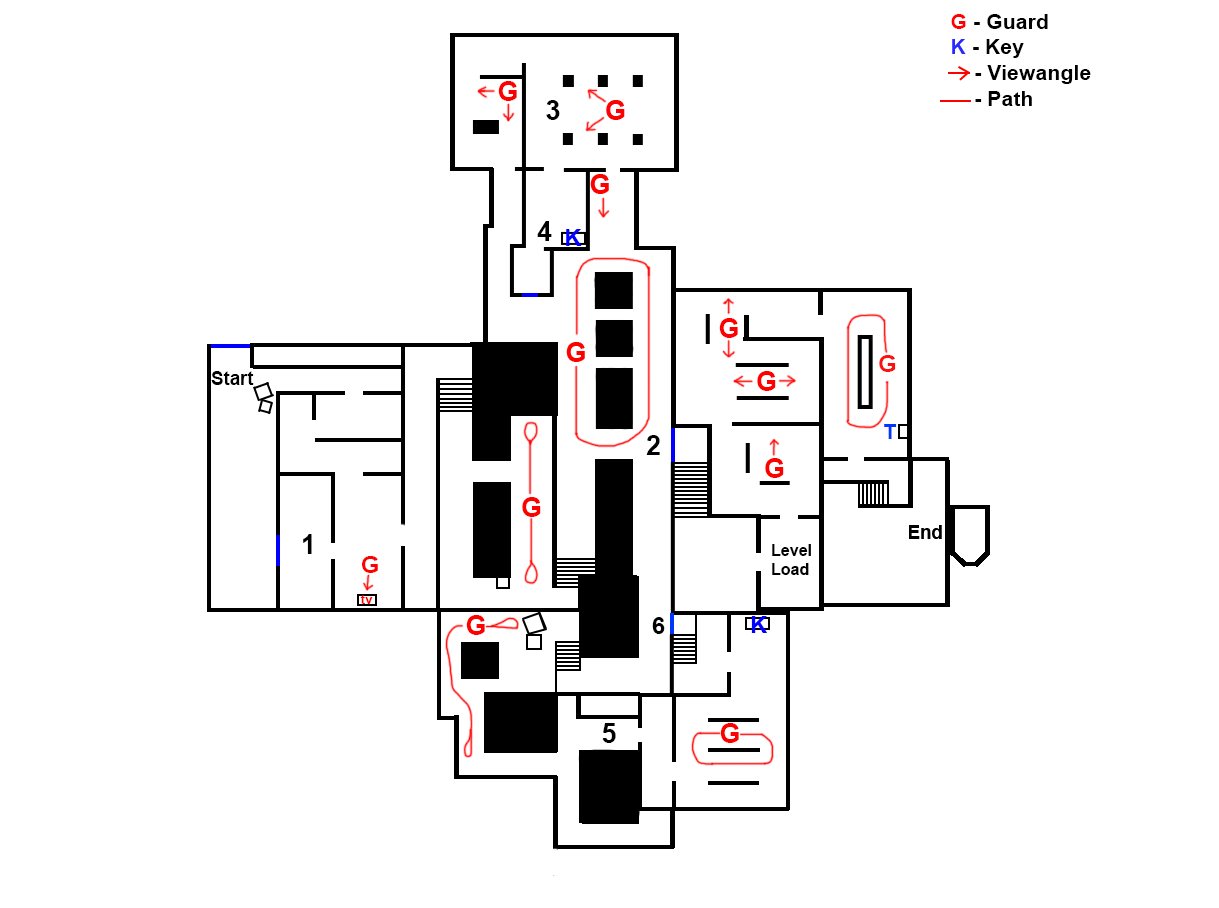
<style>
.page{position:relative;width:1219px;height:908px;background:#ffffff}
.page>*{position:absolute;margin:0}
.t1{font:21.3px "Arial-BoldMT";color:#000000}
.t2{font:21.3px "Arial-BoldMT";color:#ff0000}
.t3{font:21.3px "Arial-BoldMT";color:#2a2aff}
.t4{font:26.7px "Arial-BoldMT";color:#ff0000}
.t5{font:26.7px "Arial-BoldMT";color:#000000}
.t6{font:24px "Arial-BoldMT";color:#0000ff}
.t7{font:24px "Arial-BoldMT";color:#ff1010}
.t8{font:18.7px "Arial-BoldMT";color:#000000}
.t9{font:21.3px "Arial-BoldMT";color:#0036ff}
.t10{font:16px "Arial-BoldMT";color:#000000}
.t11{font:24px "Arial-BoldMT";color:#ff0000}
.t12{font:13.3px "Arial-BoldMT";color:#ff0000}
.t13{font:24px "Arial-BoldMT";color:#000000}
</style>
<div class="page">
<p class="t1" style="left:951px;top:14px;width:140px;height:92px"><span class="t2">G </span>- Guard<br><span class="t3">K </span>- Key<br>    - Viewangle<br>    - Path</p>
<p class="t4" style="left:498px;top:81px;width:19px;height:20px">G</p>
<p class="t5" style="left:546px;top:100px;width:14px;height:20px">3</p>
<p class="t5" style="left:537px;top:221px;width:15px;height:20px">4</p>
<p class="t6" style="left:566px;top:229px;width:16px;height:17px">K</p>
<p class="t4" style="left:719px;top:318px;width:19px;height:20px">G</p>
<p class="t7" style="left:879px;top:355px;width:17px;height:17px">G</p>
<p class="t8" style="left:211px;top:371px;width:43px;height:14px">Start</p>
<p class="t4" style="left:757px;top:371px;width:19px;height:20px">G</p>
<p class="t9" style="left:884px;top:424px;width:13px;height:15px">T</p>
<p class="t5" style="left:646px;top:435px;width:14px;height:20px">2</p>
<p class="t4" style="left:765px;top:458px;width:19px;height:20px">G</p>
<p class="t4" style="left:522px;top:497px;width:19px;height:20px">G</p>
<p class="t5" style="left:303px;top:534px;width:9px;height:20px">1</p>
<p class="t10" style="left:772px;top:544px;width:39px;height:31px">Level<br>Load</p>
<p class="t11" style="left:362px;top:556px;width:16px;height:17px">G</p>
<p class="t12" style="left:360px;top:595px;width:13px;height:9px">tv</p>
<p class="t4" style="left:466px;top:615px;width:19px;height:20px">G</p>
<p class="t13" style="left:652px;top:617px;width:13px;height:17px">6</p>
<p class="t6" style="left:751px;top:616px;width:17px;height:17px">K</p>
<p class="t5" style="left:602px;top:723px;width:14px;height:20px">5</p>
<p class="t4" style="left:720px;top:723px;width:19px;height:20px">G</p>
</div>
